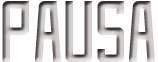
<style>
.page{position:relative;width:158px;height:62px;background:#ffffff}
.page>*{position:absolute;margin:0}
.t1{font:76.5px "SAOUI-Regular"}
</style>
<div class="page">
<p class="t1" style="left:2px;top:1px;width:153px;height:61px">PAUSA</p>
</div>
